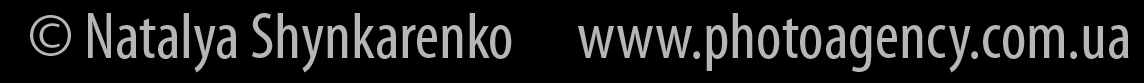
<style>
.page{position:relative;width:1144px;height:83px;background:#000000}
.page>*{position:absolute;margin:0}
.t1{font:66.8px "MyriadPro-Cond";color:#b9b5b5}
</style>
<div class="page">
<p class="t1" style="left:30px;top:13px;width:1099px;height:60px">© Natalya Shynkarenko      www.photoagency.com.ua</p>
</div>
